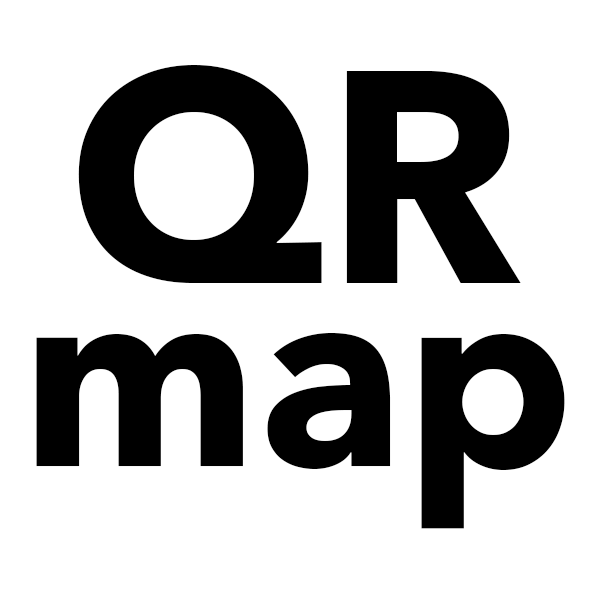
<style>
.page{position:relative;width:600px;height:600px;background:#ffffff}
.page>*{position:absolute;margin:0}
.t1{font:300px "AvenirNext-Bold";color:#000000}
.t2{font:258.3px "AvenirNext-Bold";color:#000000}
</style>
<div class="page">
<p class="t1" style="left:78px;top:65px;width:443px;height:218px">QR</p>
<p class="t2" style="left:36px;top:333px;width:529px;height:196px">map</p>
</div>
